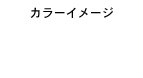
<style>
.page{position:relative;width:143px;height:78px;background:#ffffff}
.page>*{position:absolute;margin:0}
.t1{font:12px "Osaka";color:#000000}
</style>
<div class="page">
<p class="t1" style="left:30px;top:7px;width:83px;height:11px">カラーイメージ</p>
</div>
